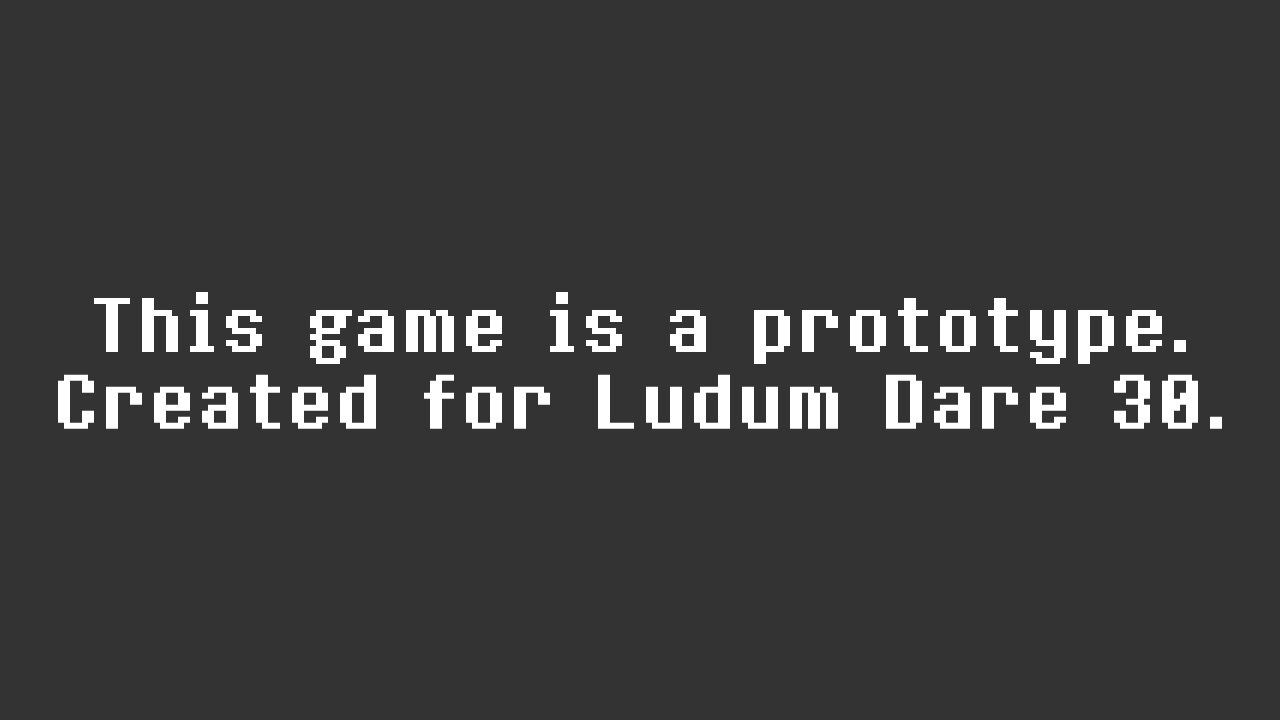
<style>
.page{position:relative;width:1280px;height:720px;background:#333333}
.page>*{position:absolute;margin:0}
.t1{font:64px "8bitoperatorRegular";color:#ffffff}
</style>
<div class="page">
<p class="t1" style="left:58px;top:292px;width:1164px;height:137px;text-align:center">This game is a prototype.<br>Created for Ludum Dare 30.</p>
</div>
